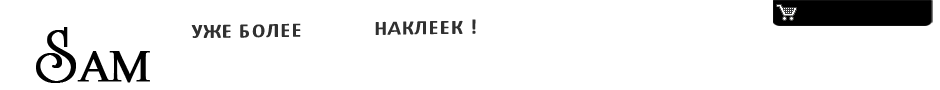
<style>
.page{position:relative;width:940px;height:90px;background:#ffffff}
.page>*{position:absolute;margin:0}
.t1{font:19.9px "Calibri-Bold";letter-spacing:0.075em;color:#303030}
.t2{font:34.1px "Calibri-Bold";letter-spacing:0.075em;color:#ffffff}
.t3{font:43.1px "PalatinoLinotype-Roman";letter-spacing:-0.075em;color:#000000;font-weight:bold}
.t4{font:71.8px "ARomanusCps";color:#000000;font-weight:bold}
</style>
<div class="page">
<p class="t1" style="left:191px;top:13px;width:285px;height:25px">УЖЕ БОЛЕЕ <span class="t2">300</span> НАКЛЕЕК !</p>
<p class="t3" style="left:36px;top:27px;width:114px;height:56px"><span class="t4">S</span>AM</p>
</div>
